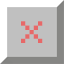
<style>
.page{position:relative;width:64px;height:64px;background:#c0c0c0}
.page>*{position:absolute;margin:0}
.t1{font:34.7px "Minecraft";letter-spacing:0.05em;color:#e76868}
</style>
<div class="page">
<p class="t1" style="left:21px;top:21px;width:22px;height:22px">x</p>
</div>
